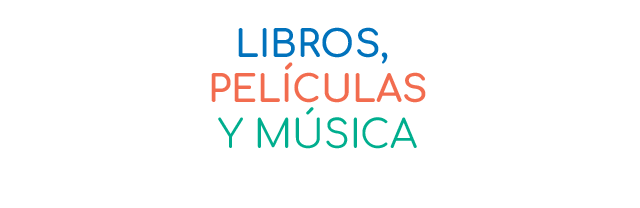
<style>
.page{position:relative;width:640px;height:208px;background:#ffffff}
.page>*{position:absolute;margin:0}
.t1{font:37.1px "Comfortaa-Bold";color:#f26c4f}
.t2{font:37.1px "Comfortaa-Bold";color:#0172bc}
.t3{font:38.7px "Comfortaa-Regular";color:#00ae8e}
</style>
<div class="page">
<p class="t1" style="left:211px;top:27px;width:215px;height:122px;text-align:center"><span class="t2">LIBROS, <br></span>PELÍCULAS<br><span class="t3">Y MÚSICA</span></p>
</div>
